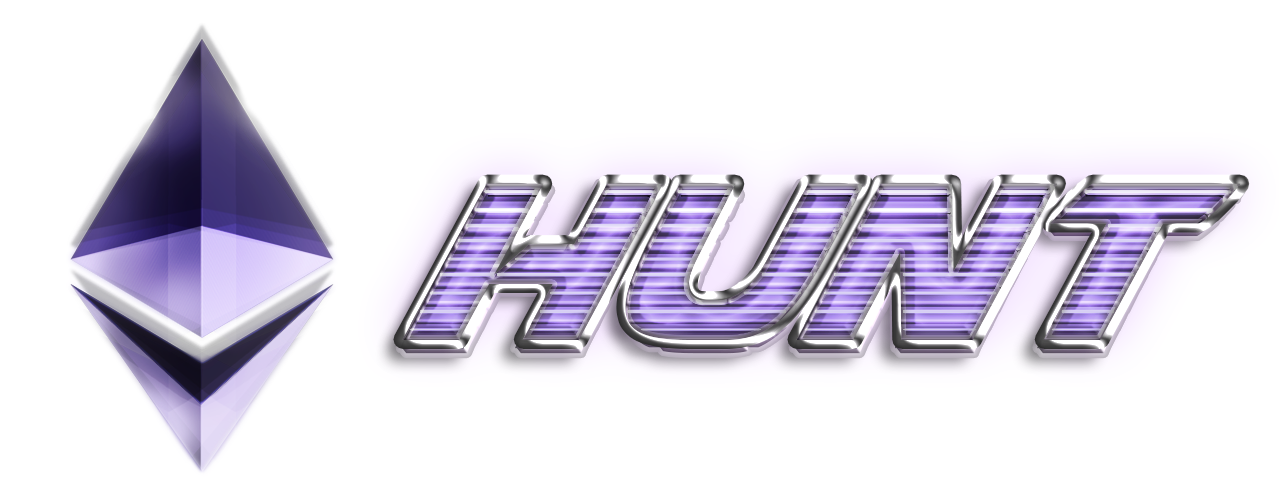
<style>
.page{position:relative;width:1279px;height:504px;background:#ffffff}
.page>*{position:absolute;margin:0}
.t1{font:295.5px "Airstrike";font-style:italic}
.t2{font:246.2px "Airstrike";font-style:italic}
</style>
<div class="page">
<p class="t1" style="left:402px;top:183px;width:839px;height:157px">HUNt<br><span class="t2">T</span></p>
<p class="t1" style="left:402px;top:183px;width:839px;height:157px">HUNt<br><span class="t2">T</span></p>
<p class="t1" style="left:402px;top:183px;width:839px;height:157px">HUNt<br><span class="t2">T</span></p>
</div>
